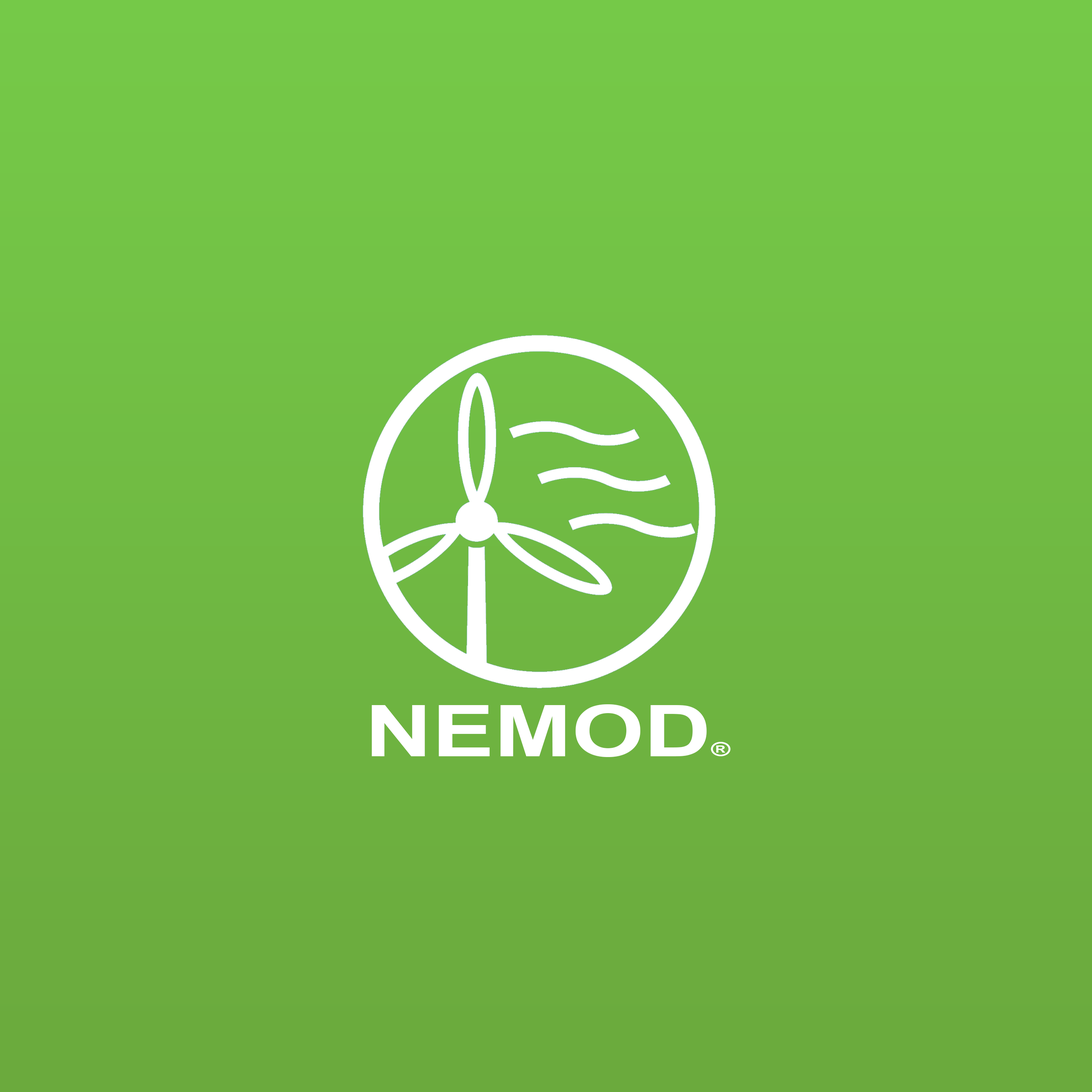
<style>
.page{position:relative;width:1092px;height:1092px}
.page>*{position:absolute;margin:0}
.t1{font:71.6px "Arial-BoldMT";color:#ffffff;scale:1.3 1}
.t2{font:19.9px "Arial-BoldMT";color:#ffffff;scale:1.3 1}
</style>
<div class="page">
<p class="t1" style="left:372px;top:704px;width:359px;height:53px">NEMOD<span class="t2">®</span></p>
</div>
